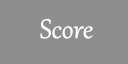
<style>
.page{position:relative;width:128px;height:64px;background:#8e8e8e}
.page>*{position:absolute;margin:0}
.t1{font:33px "Gabriola";color:#ffffff}
</style>
<div class="page">
<p class="t1" style="left:40px;top:19px;width:53px;height:20px">Score</p>
</div>
